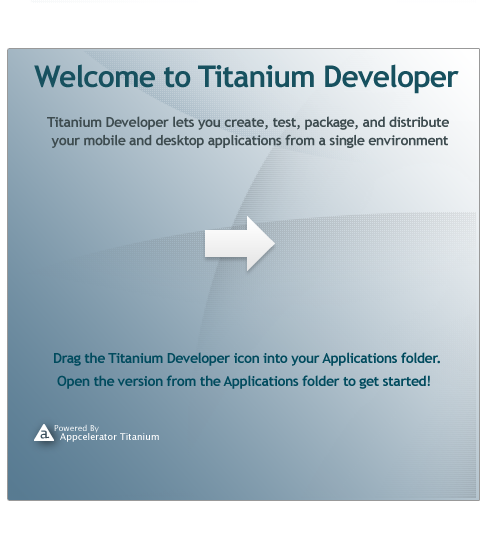
<style>
.page{position:relative;width:487px;height:535px}
.page>*{position:absolute;margin:0}
.t1{font:30px "TrebuchetMS-Bold";letter-spacing:-0.03em;color:#17515f}
.t2{font:14px/18.2px "TrebuchetMS-Bold";letter-spacing:-0.03em;color:#3e4c50}
.t3{font:14px "TrebuchetMS-Bold";letter-spacing:-0.03em;color:#014b5e}
.t4{font:9px/9px "LucidaGrande";letter-spacing:0.01em;color:#ffffff}
.t5{font:8px/9px "LucidaGrande";letter-spacing:0.01em;color:#fefefe}
</style>
<div class="page">
<p class="t1" style="left:34px;top:64px;width:425px;height:30px">Welcome to Titanium Developer</p>
<p class="t2" style="left:47px;top:116px;width:402px;height:32px;text-align:center">Titanium Developer lets you create, test, package, and distribute <br>your mobile and desktop applications from a single environment</p>
<p class="t3" style="left:54px;top:352px;width:386px;height:14px">Drag the Titanium Developer icon into your Applications folder.</p>
<p class="t3" style="left:57px;top:375px;width:373px;height:14px">Open the version from the Applications folder to get started!</p>
<p class="t4" style="left:54px;top:424px;width:105px;height:18px"><span class="t5">Powered By<br></span>  Appcelerator Titanium</p>
</div>
